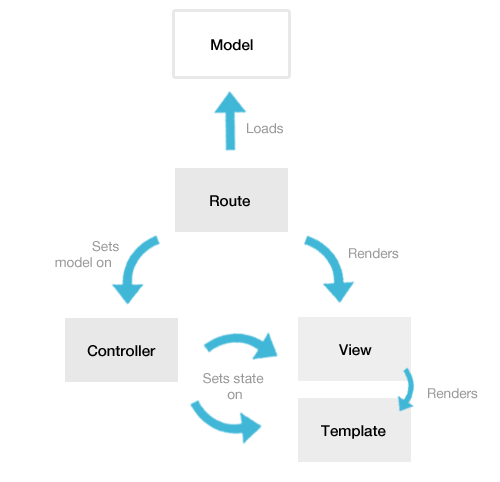
<style>
.page{position:relative;width:500px;height:482px;background:#ffffff}
.page>*{position:absolute;margin:0}
.t1{font:15px "HelveticaNeue-Medium";color:#000000}
.t2{font:13.6px "HelveticaNeue";color:#999999}
</style>
<div class="page">
<p class="t1" style="left:211px;top:39px;width:42px;height:12px">Model</p>
<p class="t2" style="left:247px;top:123px;width:36px;height:11px">Loads</p>
<p class="t1" style="left:210px;top:195px;width:40px;height:12px">Route</p>
<p class="t2" style="left:55px;top:241px;width:64px;height:27px;text-align:right">Sets <br>model on</p>
<p class="t2" style="left:349px;top:248px;width:50px;height:11px">Renders</p>
<p class="t1" style="left:87px;top:345px;width:69px;height:12px">Controller</p>
<p class="t1" style="left:339px;top:344px;width:33px;height:12px">View</p>
<p class="t2" style="left:203px;top:373px;width:61px;height:27px;text-align:center">Sets state <br>on</p>
<p class="t2" style="left:428px;top:388px;width:50px;height:11px">Renders</p>
<p class="t1" style="left:321px;top:425px;width:65px;height:14px">Template</p>
</div>
